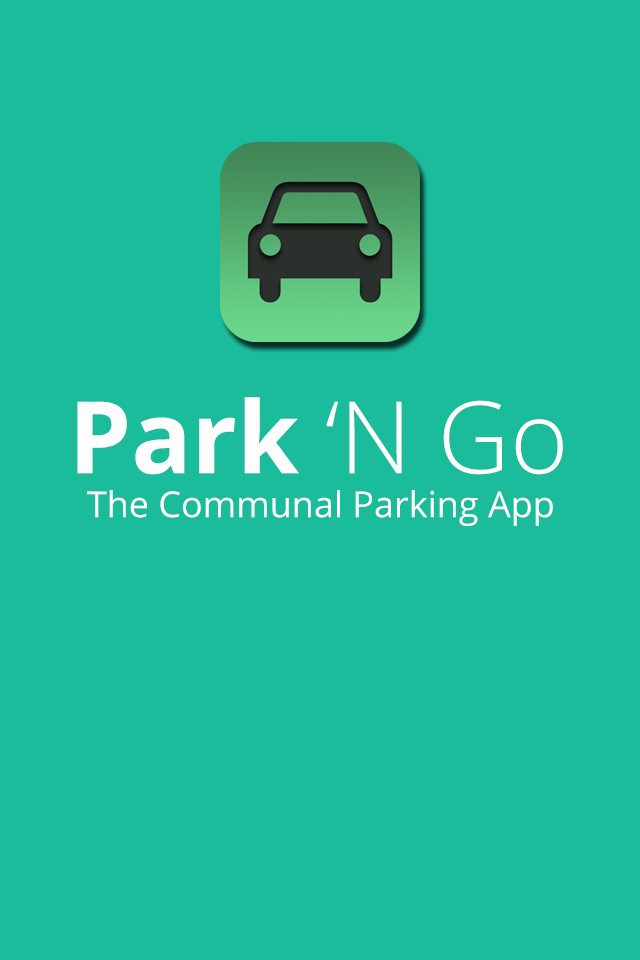
<style>
.page{position:relative;width:640px;height:960px;background:#1abc9c}
.page>*{position:absolute;margin:0}
.t1{font:100px "OpenSans-Light";color:#fdfdfd}
.t2{font:100px "OpenSans-Bold";color:#fdfdfd}
.t3{font:36px "OpenSans";color:#fdfdfd}
</style>
<div class="page">
<p class="t1" style="left:77px;top:397px;width:486px;height:78px"><span class="t2">Park </span>‘N Go</p>
<p class="t3" style="left:87px;top:490px;width:466px;height:36px">The Communal Parking App</p>
</div>
